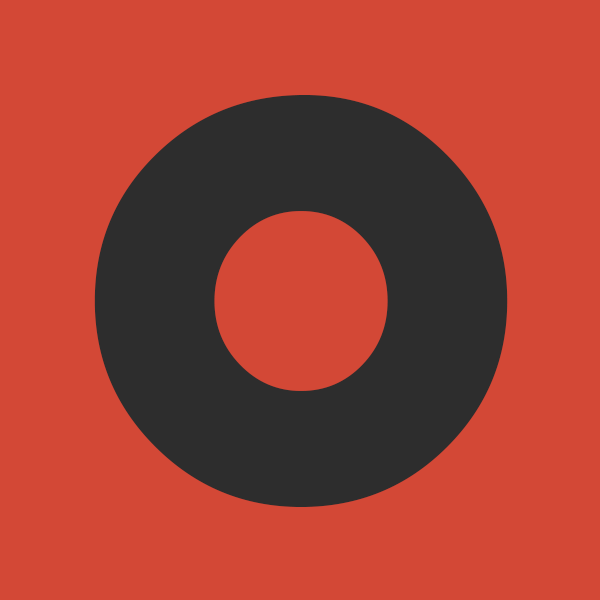
<style>
.page{position:relative;width:600px;height:600px;background:#d34836}
.page>*{position:absolute;margin:0}
.t1{font:588.6px "Bauhaus93";color:#2d2d2d}
</style>
<div class="page">
<p class="t1" style="left:94px;top:95px;width:414px;height:412px">O</p>
</div>
